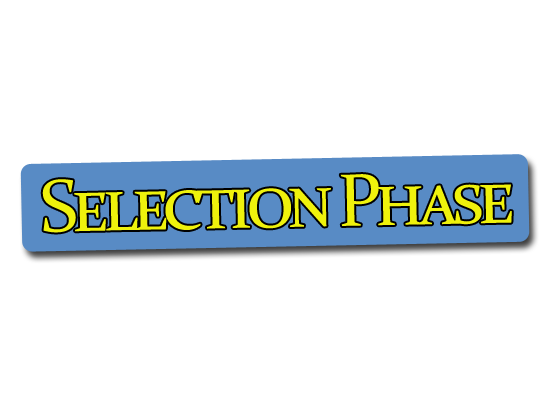
<style>
.page{position:relative;width:544px;height:416px;background:#ffffff}
.page>*{position:absolute;margin:0}
.t1{font:75px "Constantia";letter-spacing:-0.1em;color:#eff20c;font-variant:small-caps}
</style>
<div class="page">
<p class="t1" style="left:42px;top:174px;width:470px;height:59px;rotate:-1deg">Selection Phase</p>
</div>
